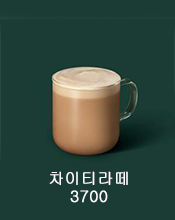
<style>
.page{position:relative;width:175px;height:220px;background:#1b3c35}
.page>*{position:absolute;margin:0}
.t1{font:16px/18px "Gulim";color:#ffffff;font-weight:bold}
</style>
<div class="page">
<p class="t1" style="left:49px;top:171px;width:79px;height:32px;text-align:center">차이티라떼<br>3700</p>
</div>
